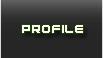
<style>
.page{position:relative;width:103px;height:58px;background:#262626}
.page>*{position:absolute;margin:0}
.t1{font:13px "Usuzi";color:#fdf9f9}
</style>
<div class="page">
<p class="t1" style="left:22px;top:25px;width:61px;height:8px">profile</p>
</div>
